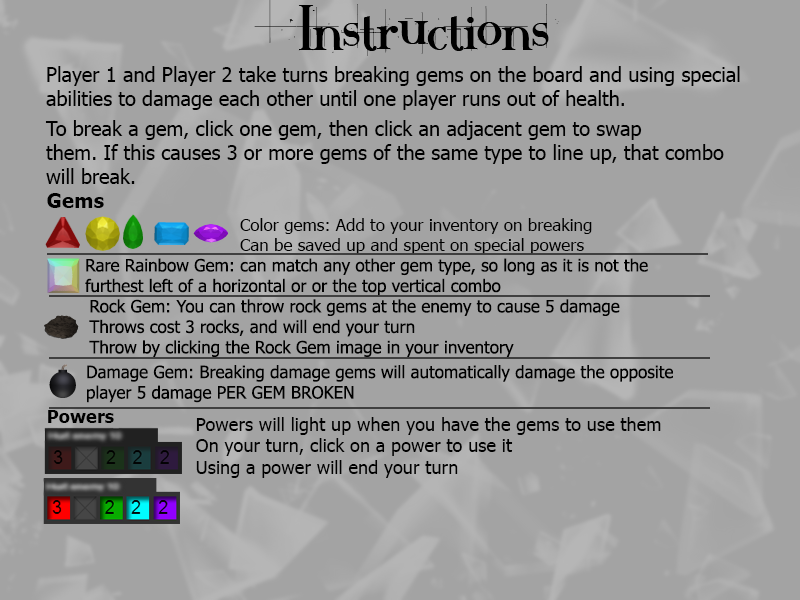
<style>
.page{position:relative;width:800px;height:600px;background:#a3a3a3}
.page>*{position:absolute;margin:0}
.t1{font:60px "Crackin";color:#000000}
.t2{font:20px "Tahoma";color:#000000}
.t3{font:20.5px "Tahoma-Bold";color:#000000}
.t4{font:17.1px "Tahoma";color:#000000}
.t5{font:18.3px "Tahoma-Bold";color:#000000}
.t6{font:18.3px "Tahoma";color:#010101}
</style>
<div class="page">
<p class="t1" style="left:254px;top:0px;width:305px;height:56px">Instructions</p>
<p class="t2" style="left:46px;top:66px;width:694px;height:44px">Player 1 and Player 2 take turns breaking gems on the board and using special <br>abilities to damage each other until one player runs out of health.</p>
<p class="t2" style="left:45px;top:120px;width:679px;height:64px">To break a gem, click one gem, then click an adjacent gem to swap<br>them. If this causes 3 or more gems of the same type to line up, that combo<br>will break.</p>
<p class="t3" style="left:47px;top:193px;width:57px;height:15px">Gems</p>
<p class="t4" style="left:240px;top:218px;width:352px;height:36px">Color gems: Add to your inventory on breaking<br>Can be saved up and spent on special powers</p>
<p class="t4" style="left:85px;top:258px;width:563px;height:38px">Rare Rainbow Gem: can match any other gem type, so long as it is not the<br>furthest left of a horizontal or or the top vertical combo</p>
<p class="t4" style="left:89px;top:299px;width:531px;height:58px">Rock Gem: You can throw rock gems at the enemy to cause 5 damage<br>Throws cost 3 rocks, and will end your turn<br>Throw by clicking the Rock Gem image in your inventory</p>
<p class="t4" style="left:87px;top:365px;width:586px;height:38px">Damage Gem: Breaking damage gems will automatically damage the opposite<br>player 5 damage PER GEM BROKEN</p>
<p class="t5" style="left:48px;top:410px;width:66px;height:13px">Powers</p>
<p class="t6" style="left:196px;top:417px;width:465px;height:61px">Powers will light up when you have the gems to use them<br>On your turn, click on a power to use it<br>Using a power will end your turn</p>
</div>
